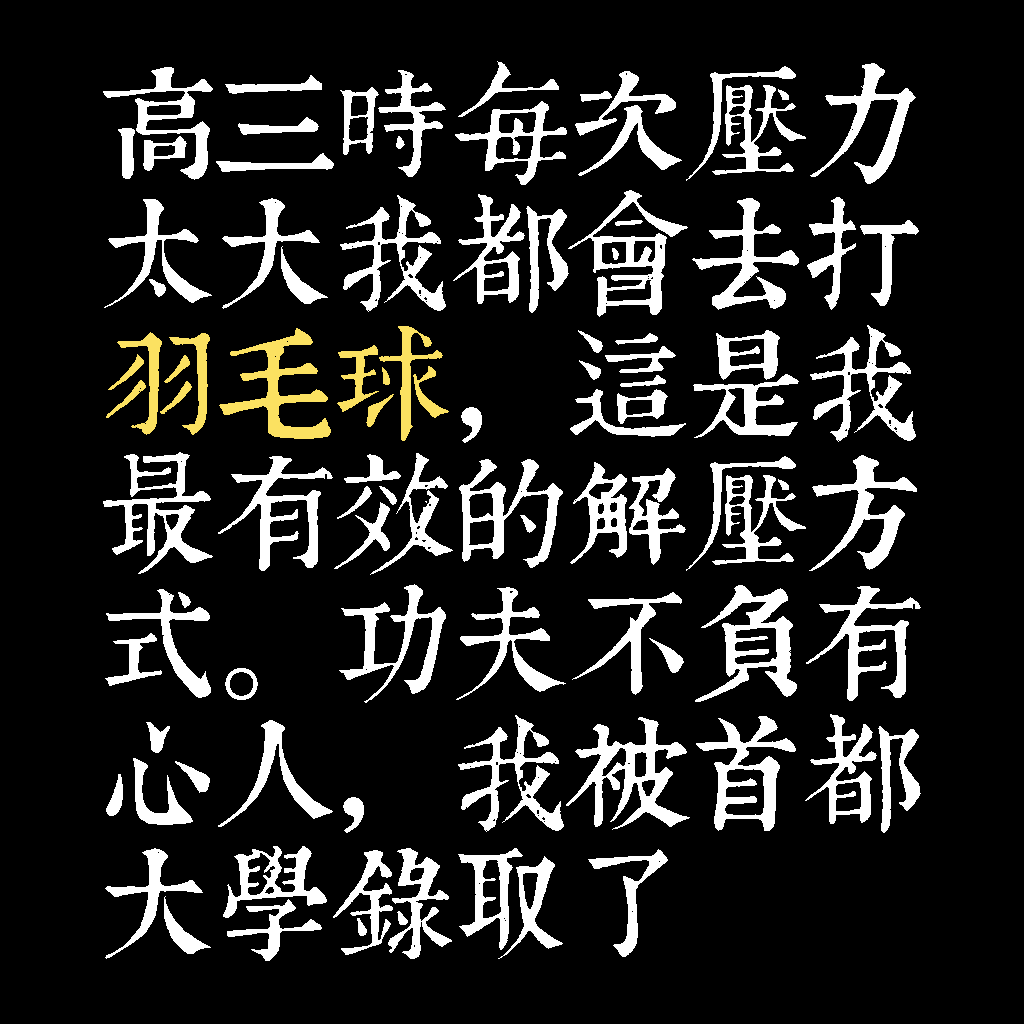
<style>
.page{position:relative;width:1024px;height:1024px;background:#000000}
.page>*{position:absolute;margin:0}
.t1{font:120px/130px "TpldKhangXiDictTrial";letter-spacing:-0.02em;color:#ffffff}
.t2{font:120px/130px "TpldKhangXiDictTrial";letter-spacing:-0.02em;color:#fbe161}
</style>
<div class="page">
<p class="t1" style="left:103px;top:61px;width:818px;height:900px">高三時每次壓力<br>太大我都會去打<br><span class="t2">羽毛球</span>，這是我<br>最有效的解壓方<br>式。功夫不負有<br>心人，我被首都<br>大學錄取了</p>
</div>
